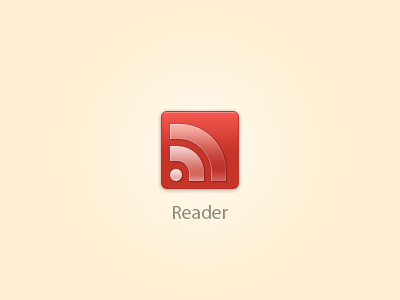
<style>
.page{position:relative;width:400px;height:300px;background:#ffeed1}
.page>*{position:absolute;margin:0}
.t1{font:19.4px "MyriadPro-Regular";color:#8c8d77}
</style>
<div class="page">
<p class="t1" style="left:173px;top:205px;width:55px;height:14px">Reader</p>
</div>
